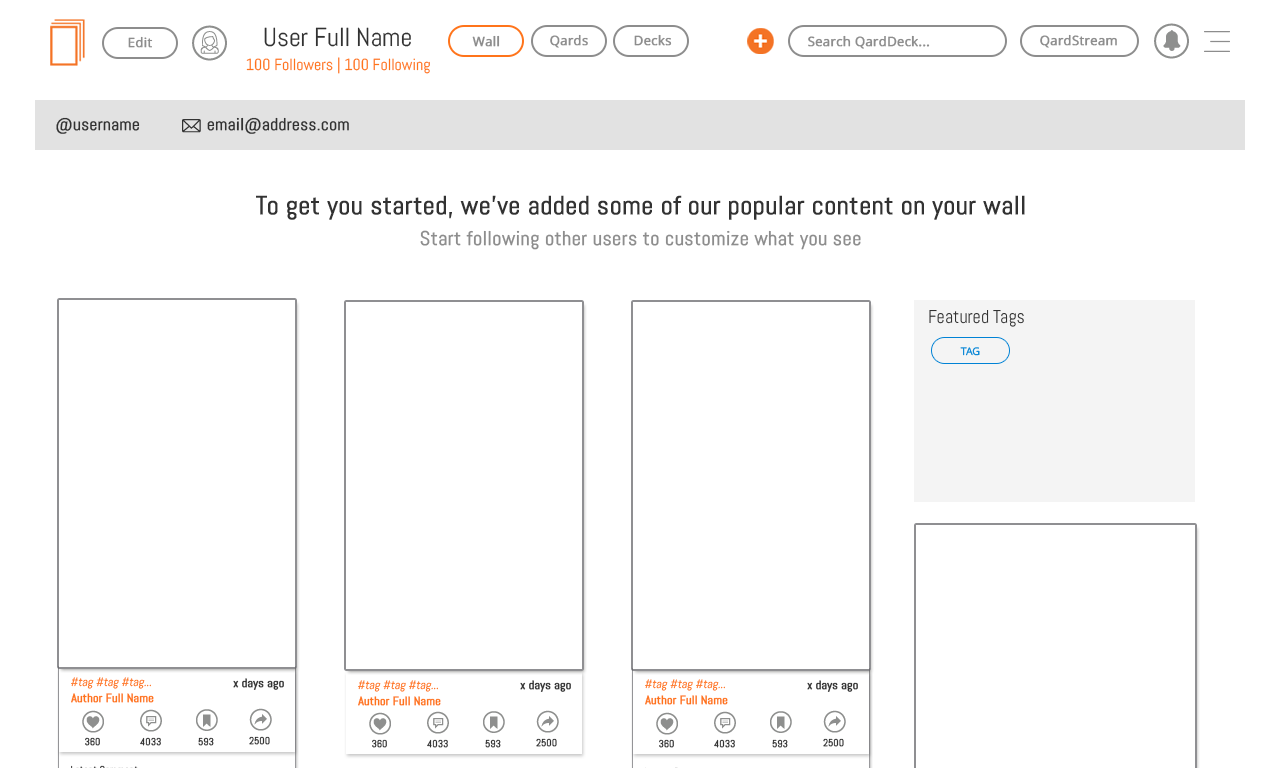
<style>
.page{position:relative;width:1280px;height:768px;background:#ffffff}
.page>*{position:absolute;margin:0}
.t1{font:26px "Abel-Regular";color:#323232}
.t2{font:13px "OpenSans";color:#8d8d8d;font-weight:bold}
.t3{font:16px "Abel-Regular";color:#ff741b}
.t4{font:17.1px "Abel-Regular";color:#323232;font-weight:bold}
.t5{font:26.1px "Abel-Regular";color:#323232;font-weight:bold}
.t6{font:20px "Abel-Regular";color:#8d8d8d;font-weight:bold}
</style>
<div class="page">
<p class="t1" style="left:264px;top:27px;width:147px;height:20px">User Full Name</p>
<p class="t2" style="left:128px;top:36px;width:25px;height:12px">Edit</p>
<p class="t2" style="left:472px;top:35px;width:28px;height:12px">Wall</p>
<p class="t2" style="left:550px;top:34px;width:38px;height:14px">Qards</p>
<p class="t2" style="left:634px;top:34px;width:38px;height:12px">Decks</p>
<p class="t2" style="left:808px;top:35px;width:122px;height:14px">Search QardDeck...</p>
<p class="t2" style="left:1040px;top:34px;width:77px;height:14px">QardStream</p>
<p class="t3" style="left:246px;top:57px;width:184px;height:17px">100 Followers | 100 Following</p>
<p class="t4" style="left:56px;top:117px;width:84px;height:17px">@username</p>
<p class="t4" style="left:207px;top:117px;width:142px;height:17px">email@address.com</p>
<p class="t5" style="left:256px;top:195px;width:769px;height:25px">To get you started, we’ve added some of our popular content on your wall</p>
<p class="t6" style="left:420px;top:230px;width:441px;height:20px">Start following other users to customize what you see</p>
</div>
